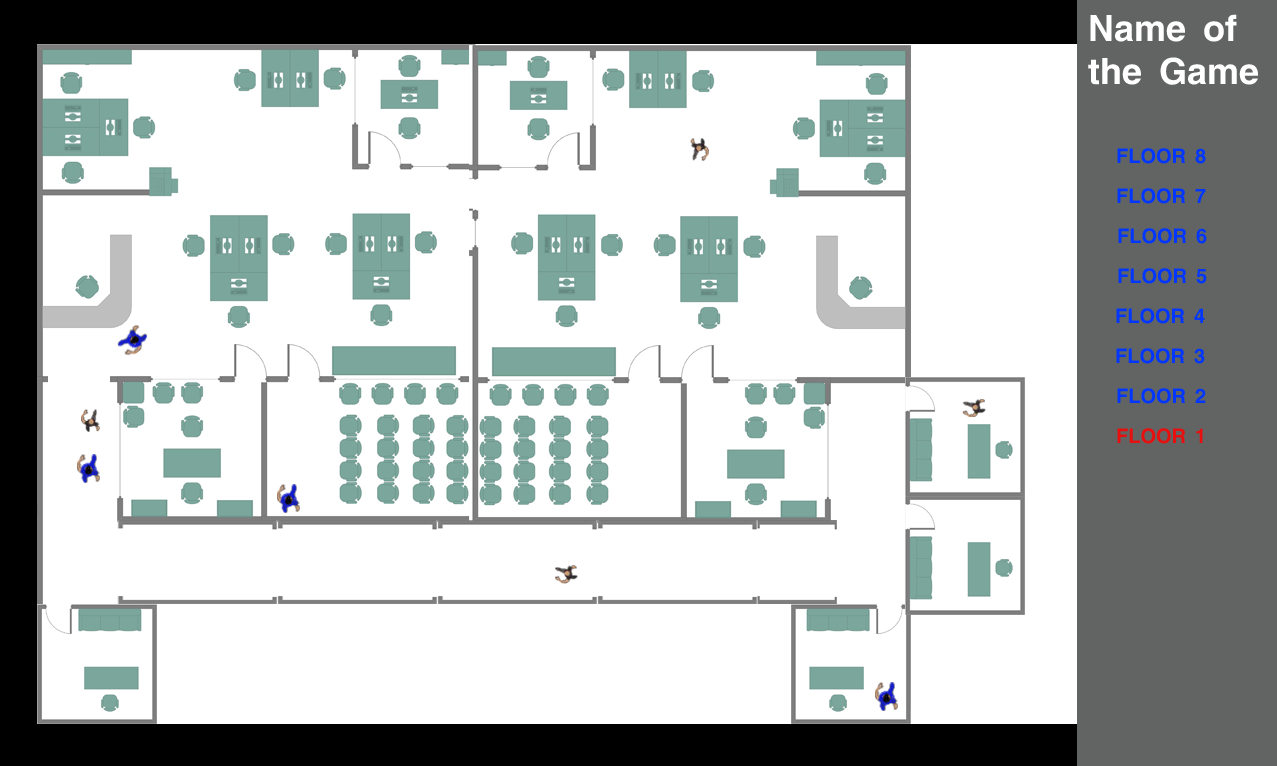
<style>
.page{position:relative;width:1277px;height:766px;background:#ffffff}
.page>*{position:absolute;margin:0}
.t1{font:36px "YoxallBold";color:#ffffff}
.t2{font:20px "YoxallBold";color:#0036ff}
.t3{font:20px "YoxallBold";color:#e80f0f}
</style>
<div class="page">
<p class="t1" style="left:1088px;top:14px;width:170px;height:71px">Name of <br>the Game</p>
<p class="t2" style="left:1117px;top:148px;width:89px;height:16px">FLOOR 8</p>
<p class="t2" style="left:1117px;top:188px;width:89px;height:16px">FLOOR 7</p>
<p class="t2" style="left:1118px;top:228px;width:89px;height:16px">FLOOR 6</p>
<p class="t2" style="left:1118px;top:268px;width:89px;height:16px">FLOOR 5</p>
<p class="t2" style="left:1116px;top:308px;width:89px;height:16px">FLOOR 4</p>
<p class="t2" style="left:1116px;top:348px;width:89px;height:16px">FLOOR 3</p>
<p class="t2" style="left:1117px;top:388px;width:89px;height:16px">FLOOR 2</p>
<p class="t3" style="left:1117px;top:428px;width:86px;height:16px">FLOOR 1</p>
</div>
